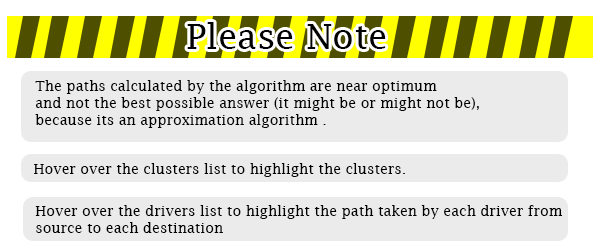
<style>
.page{position:relative;width:600px;height:248px;background:#ebebeb}
.page>*{position:absolute;margin:0}
.t1{font:34.6px "LucidaFax";color:#000000}
.t2{font:14px "LucidaFax";color:#000000}
</style>
<div class="page">
<p class="t1" style="left:187px;top:22px;width:199px;height:27px">Please Note</p>
<p class="t2" style="left:35px;top:80px;width:444px;height:48px">The paths calculated by the algorithm are near optimum<br>and not the best possible answer (it might be or might not be), <br>because its an approximation algorithm .</p>
<p class="t2" style="left:34px;top:163px;width:371px;height:14px">Hover over the clusters list to highlight the clusters.</p>
<p class="t2" style="left:35px;top:205px;width:528px;height:28px">Hover over the drivers list to highlight the path taken by each driver from <br>source to each destination</p>
</div>
